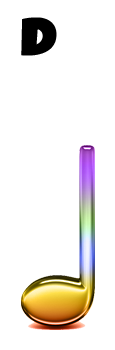
<style>
.page{position:relative;width:115px;height:350px;background:#ffffff}
.page>*{position:absolute;margin:0}
.t1{font:54px "LuckiestGuy-Regular";letter-spacing:0.005em;color:#000000;font-weight:bold;scale:1.11 1}
</style>
<div class="page">
<p class="t1" style="left:21px;top:17px;width:36px;height:39px">D</p>
</div>
